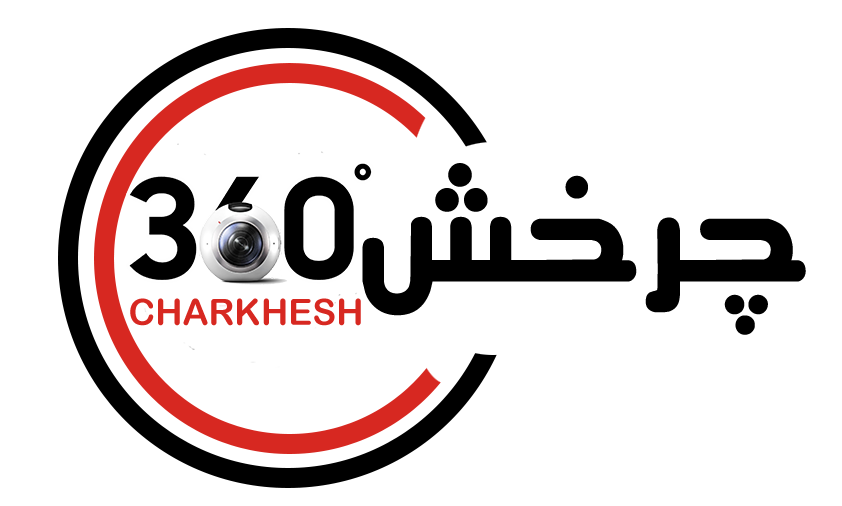
<style>
.page{position:relative;width:842px;height:506px;background:#ffffff}
.page>*{position:absolute;margin:0}
.t1{font:151px "Wmasnavi";color:#000000}
.t2{font:36px "ArialRoundedMTBold";color:#d72821}
</style>
<div class="page">
<p class="t1" style="left:362px;top:163px;width:444px;height:172px">چرخش</p>
<p class="t2" style="left:130px;top:298px;width:231px;height:28px">CHARKHESH</p>
</div>
